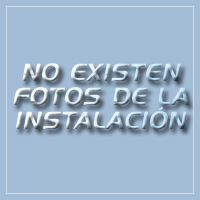
<style>
.page{position:relative;width:200px;height:200px;background:#a3bdd6}
.page>*{position:absolute;margin:0}
.t1{font:24px/6px "HandelGothicBT-Regular";letter-spacing:0.025em;font-style:italic}
</style>
<div class="page">
<p class="t1" style="left:13px;top:63px;width:176px;height:67px;text-align:center">NO EXISTEN<br><br><br><br>FOTOS DE LA <br><br><br><br>INSTALACIÓN</p>
</div>
